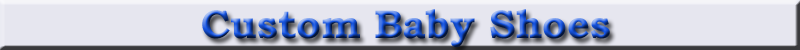
<style>
.page{position:relative;width:800px;height:50px;background:#e6e6ef}
.page>*{position:absolute;margin:0}
.t1{font:40px "BookmanOldStyle-Bold";color:#1654e0}
</style>
<div class="page">
<p class="t1" style="left:202px;top:9px;width:408px;height:38px">Custom Baby Shoes</p>
</div>
